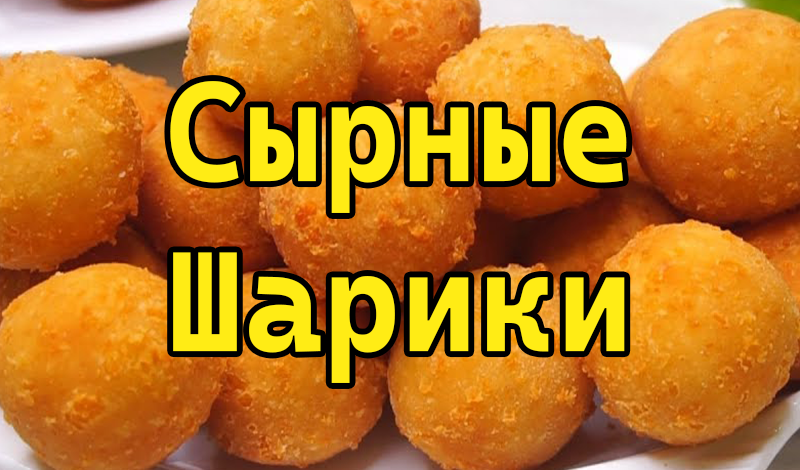
<style>
.page{position:relative;width:800px;height:470px}
.page>*{position:absolute;margin:0}
.t1{font:142.1px "CascadiaCodeRoman-Bold";color:#ffec15;scale:0.94 1}
</style>
<div class="page">
<p class="t1" style="left:170px;top:81px;width:457px;height:302px;text-align:center">Сырные <br>Шарики</p>
</div>
